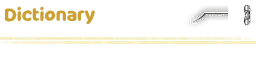
<style>
.page{position:relative;width:256px;height:64px;background:#ffffff}
.page>*{position:absolute;margin:0}
.t1{font:18px "MilkyNiceClean";color:#cba135}
</style>
<div class="page">
<p class="t1" style="left:4px;top:6px;width:91px;height:18px">Dictionary</p>
</div>
